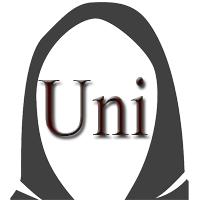
<style>
.page{position:relative;width:200px;height:200px;background:#ffffff}
.page>*{position:absolute;margin:0}
.t1{font:83.3px "TimesNewRomanPSMT";scale:0.89 1}
</style>
<div class="page">
<p class="t1" style="left:38px;top:77px;width:110px;height:59px">Uni</p>
</div>
